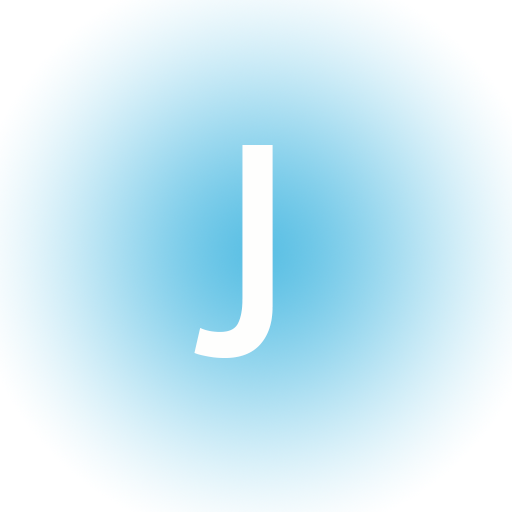
<style>
.page{position:relative;width:512px;height:512px}
.page>*{position:absolute;margin:0}
.t1{font:300px "PTSans-Caption";color:#fefefd}
</style>
<div class="page">
<p class="t1" style="left:194px;top:145px;width:79px;height:213px">J</p>
</div>
